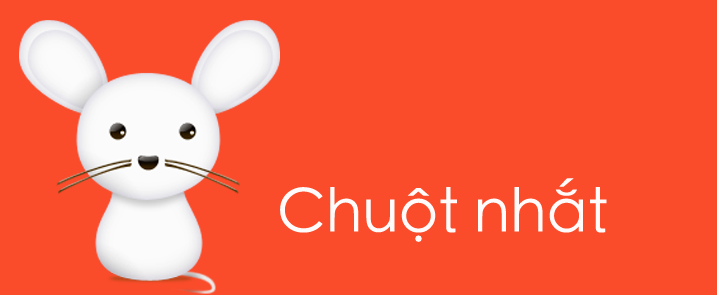
<style>
.page{position:relative;width:717px;height:295px;background:#fa4b2a}
.page>*{position:absolute;margin:0}
.t1{font:60px "STHeitiTC-Light";color:#fefbfa}
</style>
<div class="page">
<p class="t1" style="left:280px;top:178px;width:327px;height:64px">Chuột nhắt</p>
</div>
